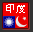
<style>
.page{position:relative;width:33px;height:32px;background:#333333}
.page>*{position:absolute;margin:0}
.t1{font:10.4px "SimSun";color:#ffffff}
</style>
<div class="page">
<p class="t1" style="left:6px;top:4px;width:19px;height:9px">印度</p>
</div>
